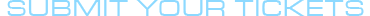
<style>
.page{position:relative;width:370px;height:16px;background:#ffffff}
.page>*{position:absolute;margin:0}
.t1{font:24px "MicrogrammaD-MediExte";letter-spacing:0.075em;color:#8dd9ff;text-transform:uppercase}
</style>
<div class="page">
<p class="t1" style="left:7px;top:0px;width:357px;height:16px">submit your tickets</p>
</div>
